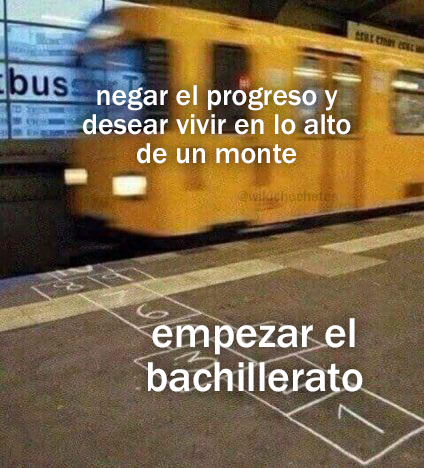
<style>
.page{position:relative;width:424px;height:468px}
.page>*{position:absolute;margin:0}
.t1{font:29.7px "FranklinGothic-Medium";color:#fffefe}
.t2{font:14.8px "FranklinGothic-Medium";color:#9f6716}
.t3{font:43.2px "FranklinGothic-Medium";color:#fffefe}
</style>
<div class="page">
<p class="t1" style="left:83px;top:85px;width:268px;height:79px;text-align:center">negar el progreso y<br>desear vivir en lo alto<br>de un monte</p>
<p class="t2" style="left:237px;top:191px;width:101px;height:11px">@wikichochetes</p>
<p class="t3" style="left:148px;top:318px;width:215px;height:74px;text-align:center">empezar el<br>bachillerato</p>
</div>
